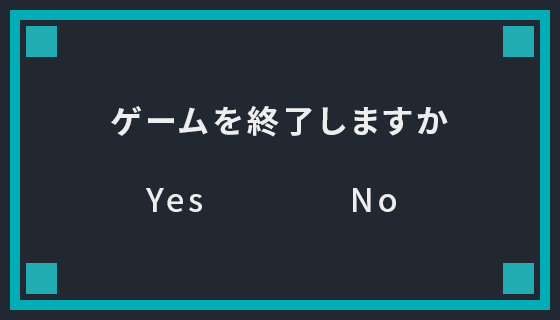
<style>
.page{position:relative;width:560px;height:320px;background:#222831}
.page>*{position:absolute;margin:0}
.t1{font:32px "SourceHanSansJP-Bold";letter-spacing:0.12em;color:#eeeeee}
.t2{font:32px "SourceHanSansJP-Medium";letter-spacing:0.12em;color:#eeeeee}
</style>
<div class="page">
<p class="t1" style="left:111px;top:106px;width:337px;height:31px">ゲームを終了しますか</p>
<p class="t2" style="left:146px;top:188px;width:250px;height:24px">Yes　　　　No</p>
</div>
